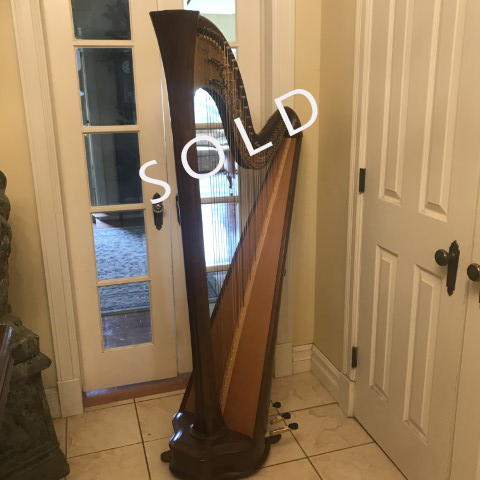
<style>
.page{position:relative;width:480px;height:480px}
.page>*{position:absolute;margin:0}
.t1{font:60px "ErasITC-Medium";color:#f3f0f1}
</style>
<div class="page">
<p class="t1" style="left:139px;top:89px;width:179px;height:115px;rotate:-26deg">S O L D</p>
</div>
